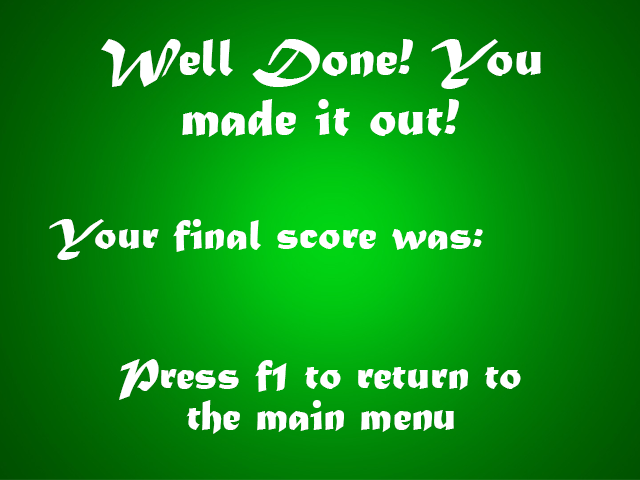
<style>
.page{position:relative;width:640px;height:480px}
.page>*{position:absolute;margin:0}
.t1{font:55px "MaturaMTScriptCapitals";color:#ffffff}
.t2{font:45px "MaturaMTScriptCapitals";color:#ffffff}
</style>
<div class="page">
<p class="t1" style="left:101px;top:39px;width:440px;height:50px">Well Done! You</p>
<p class="t1" style="left:182px;top:99px;width:277px;height:38px">made it out!</p>
<p class="t2" style="left:49px;top:219px;width:434px;height:41px">Your final score was:</p>
<p class="t2" style="left:119px;top:359px;width:402px;height:41px">Press f1 to return to</p>
<p class="t2" style="left:186px;top:400px;width:268px;height:34px">the main menu</p>
</div>
